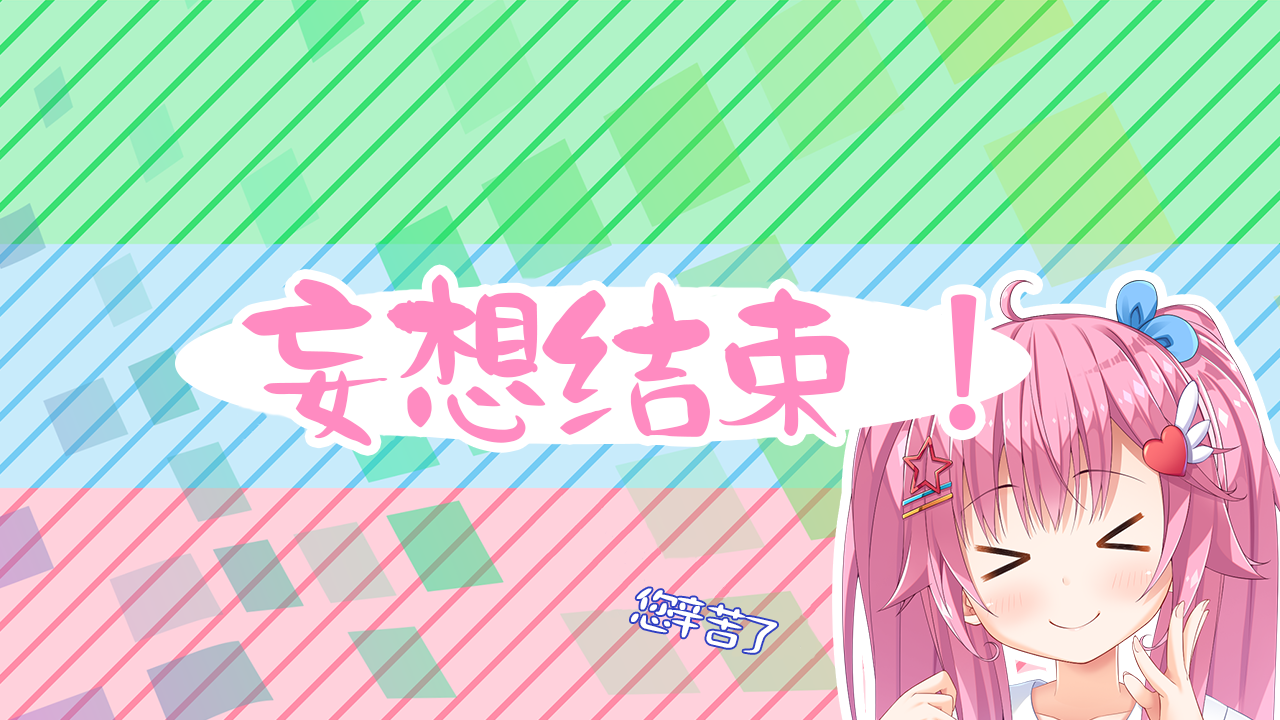
<style>
.page{position:relative;width:1280px;height:720px}
.page>*{position:absolute;margin:0}
.t1{font:181.6px "AaDingXiangShouShu";letter-spacing:-0.26em;color:#ff8bc1;font-weight:bold;scale:1.14 1}
.t2{font:49.6px "ZQKNLT-Regular";letter-spacing:-0.26em;color:#ffffff;font-weight:bold;scale:1.14 1}
</style>
<div class="page">
<p class="t1" style="left:241px;top:274px;width:609px;height:172px">妄想结束</p>
<p class="t2" style="left:631px;top:588px;width:146px;height:65px;rotate:14deg">您辛苦了</p>
</div>
